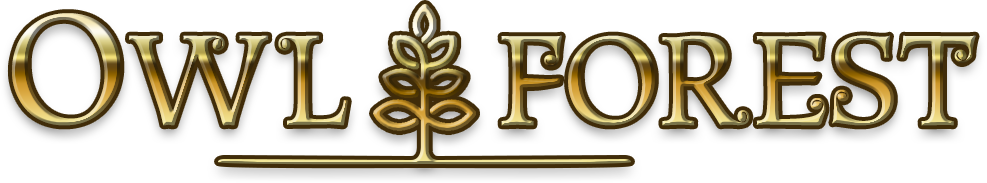
<style>
.page{position:relative;width:987px;height:183px;background:#ffffff}
.page>*{position:absolute;margin:0}
.t1{font:140px "MetshigeNormal";letter-spacing:0.025em}
</style>
<div class="page">
<p class="t1" style="left:11px;top:13px;width:965px;height:113px">Owl  forest</p>
</div>
